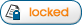
<style>
.page{position:relative;width:82px;height:25px;background:#ffffff}
.page>*{position:absolute;margin:0}
.t1{font:12px "Decker-Bold";color:#ff9900;font-weight:bold}
</style>
<div class="page">
<p class="t1" style="left:29px;top:7px;width:40px;height:10px">locked</p>
</div>
